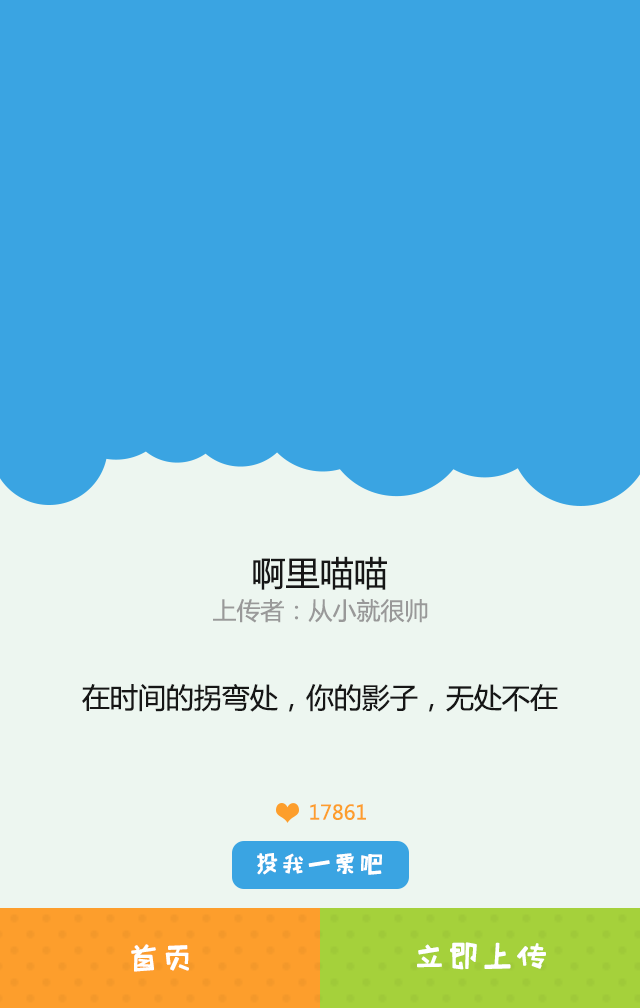
<style>
.page{position:relative;width:640px;height:1008px;background:#3aa4e2}
.page>*{position:absolute;margin:0}
.t1{font:34px "MicrosoftYaHei";color:#161616}
.t2{font:24px "MicrosoftYaHei";color:#999999}
.t3{font:28px "MicrosoftYaHei";color:#161616}
.t4{font:20px "MicrosoftYaHei";color:#fd9e2c}
.t5{font:26px "HappyZcool";color:#ffffff}
.t6{font:34px "HappyZcool";color:#ffffff}
</style>
<div class="page">
<p class="t1" style="left:253px;top:556px;width:134px;height:34px">啊里喵喵</p>
<p class="t2" style="left:213px;top:598px;width:215px;height:25px">上传者：从小就很帅</p>
<p class="t3" style="left:82px;top:684px;width:476px;height:28px">在时间的拐弯处，你的影子，无处不在</p>
<p class="t4" style="left:310px;top:804px;width:56px;height:16px">17861</p>
<p class="t5" style="left:257px;top:853px;width:125px;height:22px">投我一票吧</p>
<p class="t6" style="left:417px;top:942px;width:129px;height:28px">立即上传</p>
<p class="t6" style="left:131px;top:944px;width:58px;height:28px">首页</p>
</div>
